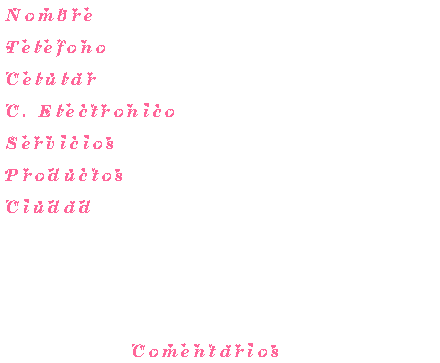
<style>
.page{position:relative;width:440px;height:363px;background:#ffffff}
.page>*{position:absolute;margin:0}
.t1{font:17px/16px "QTSchoolCentury-BoldItalic";letter-spacing:0.2em;color:#ff6699}
</style>
<div class="page">
<p class="t1" style="left:5px;top:7px;width:273px;height:350px">Nombre<br><br>Telefono<br><br>Celular<br><br>C. Electronico<br><br>Servicios<br><br>Productos<br><br>Ciudad<br><br><br><br><br><br><br><br><br>               Comentarios</p>
</div>
